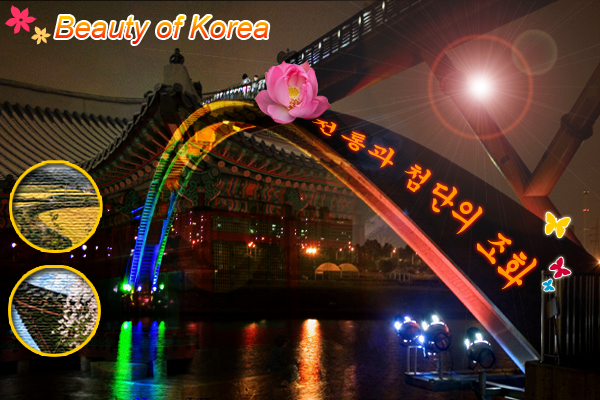
<style>
.page{position:relative;width:600px;height:400px}
.page>*{position:absolute;margin:0}
.t1{font:30px "Arial-ItalicMT"}
.t2{font:30px "Gungsuh";color:#ff9900}
</style>
<div class="page">
<p class="t1" style="left:55px;top:16px;width:214px;height:28px">Beauty of Korea</p>
<p class="t2" style="left:312px;top:119px;width:225px;height:171px;rotate:37deg">전통과 첨단의 조화</p>
</div>
